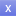
<style>
.page{position:relative;width:16px;height:16px}
.page>*{position:absolute;margin:0}
.t1{font:13px "SegoeUI";letter-spacing:0.06em;color:#ffffff}
</style>
<div class="page">
<p class="t1" style="left:5px;top:5px;width:6px;height:7px">x</p>
</div>
